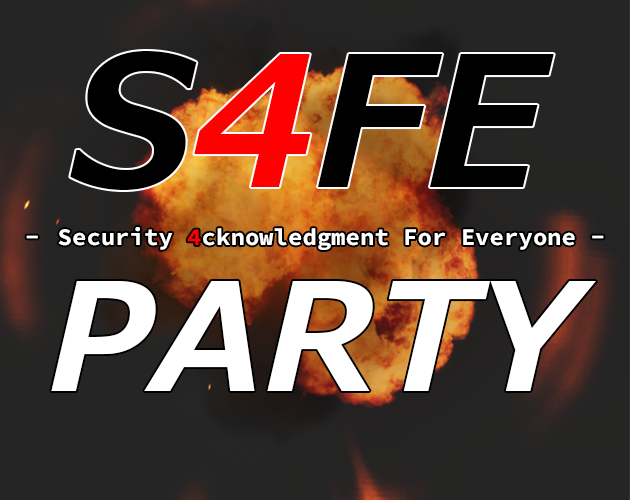
<style>
.page{position:relative;width:630px;height:500px}
.page>*{position:absolute;margin:0}
.t1{font:180.6px "MeiryoUI-BoldItalic";color:#000000}
.t2{font:180.6px "MeiryoUI-BoldItalic";color:#ff0000}
.t3{font:24px "SourceCodePro-Bold";color:#ffffff}
.t4{font:24px "SourceCodePro-Bold";color:#ff0000}
.t5{font:150px "MeiryoUI-BoldItalic";color:#ffffff}
</style>
<div class="page">
<p class="t1" style="left:70px;top:51px;width:484px;height:139px">S<span class="t2">4</span>FE</p>
<p class="t3" style="left:26px;top:227px;width:578px;height:23px">Security <span class="t4">4</span>cknowledgment For Everyone -</p>
<p class="t5" style="left:51px;top:281px;width:545px;height:110px">PARTY</p>
</div>
